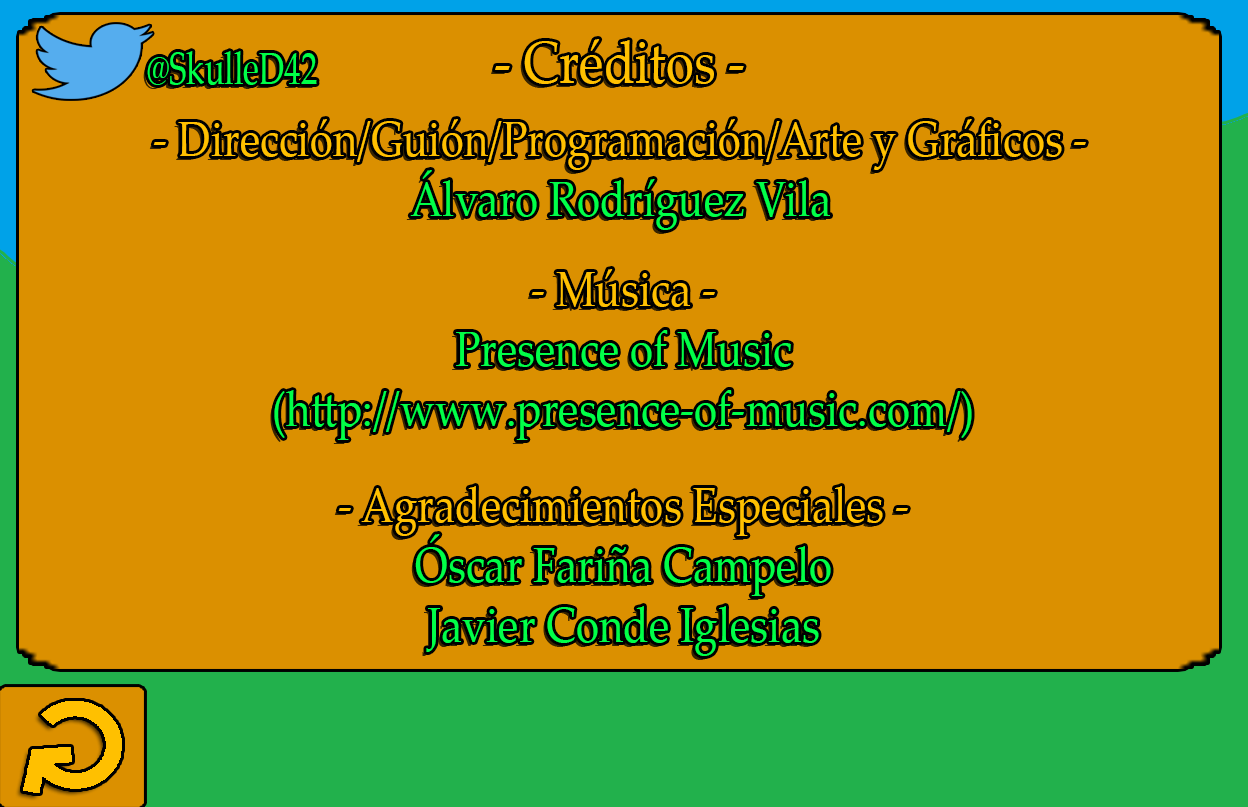
<style>
.page{position:relative;width:1248px;height:807px;background:#db9000}
.page>*{position:absolute;margin:0}
.t1{font:60px "PalatinoLinotype-Roman";color:#ffc000;scale:0.84 1}
.t2{font:45.2px "PalatinoLinotype-Roman";color:#00ff48;scale:0.72 1}
.t3{font:50px "PalatinoLinotype-Roman";color:#ffc000;scale:0.84 1}
.t4{font:50px "PalatinoLinotype-Roman";color:#00ff48;scale:0.84 1}
</style>
<div class="page">
<p class="t1" style="left:495px;top:39px;width:249px;height:45px">- Créditos -</p>
<p class="t2" style="left:147px;top:51px;width:170px;height:34px">@SkulleD42</p>
<p class="t3" style="left:153px;top:119px;width:933px;height:111px;text-align:center">- Dirección/Guión/Programación/Arte y Gráficos -<br><span class="t4">Álvaro Rodríguez Vila</span></p>
<p class="t4" style="left:274px;top:269px;width:698px;height:171px;text-align:center"><span class="t3">- Música -<br></span>Presence of Music<br>(http://www.presence-of-music.com/)</p>
<p class="t4" style="left:338px;top:486px;width:570px;height:170px;text-align:center"><span class="t3">- Agradecimientos Especiales -<br></span>Óscar Fariña Campelo<br>Javier Conde Iglesias</p>
</div>
